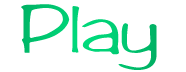
<style>
.page{position:relative;width:186px;height:72px;background:#ffffff}
.page>*{position:absolute;margin:0}
.t1{font:72px "Arctic2";color:#00c871}
</style>
<div class="page">
<p class="t1" style="left:21px;top:4px;width:136px;height:66px">Play</p>
</div>
